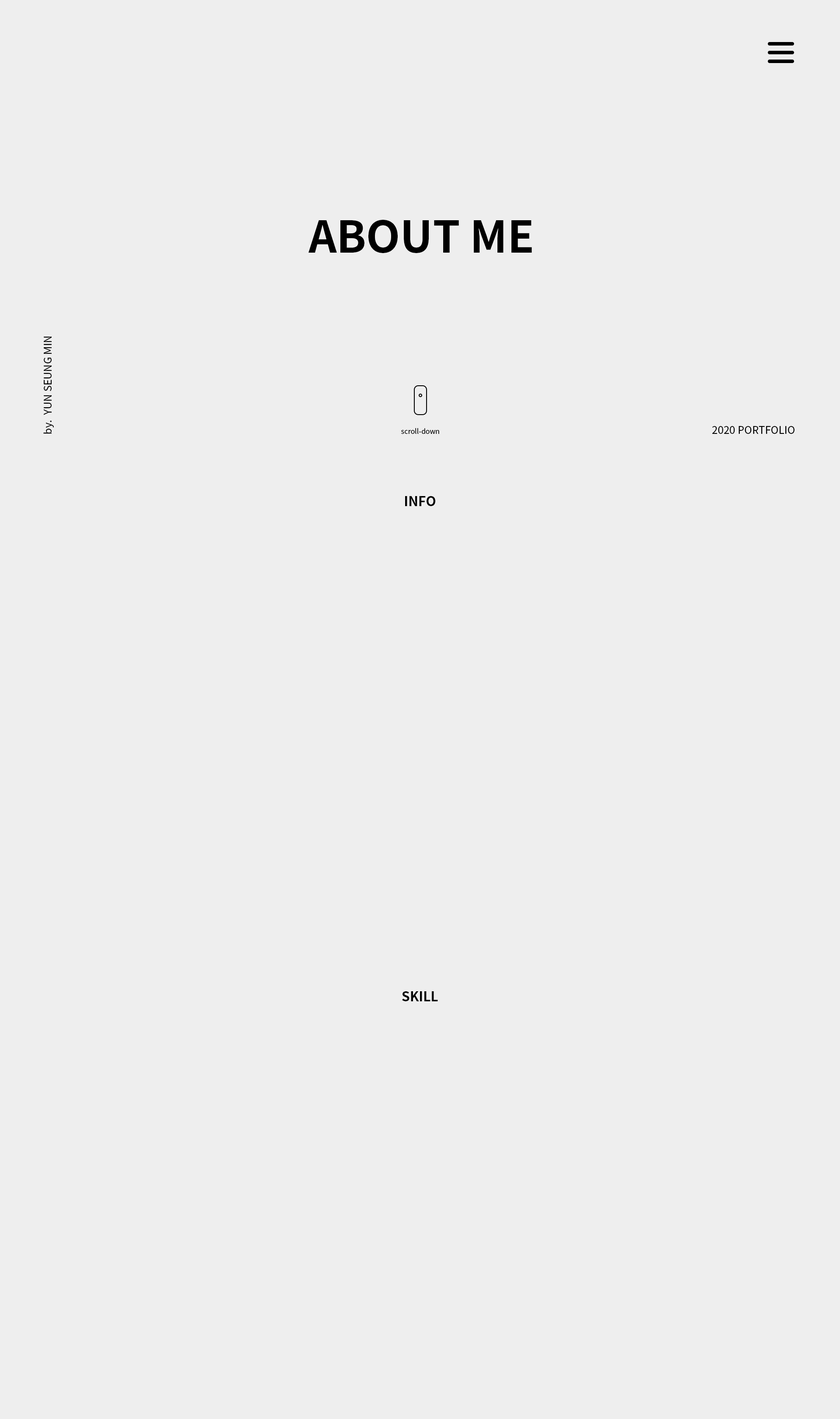
<style>
.page{position:relative;width:840px;height:1419px;background:#eeeeee}
.page>*{position:absolute;margin:0}
.t1{font:43.8px "NotoSansKR-Bold";color:#000000}
.t2{font:10.5px "NotoSansKR-Regular";color:#000000}
.t3{font:7px "NotoSansKR-Regular";letter-spacing:-0.001em;color:#000000}
.t4{font:13.1px "NotoSansKR-Bold";color:#000000}
</style>
<div class="page">
<p class="t1" style="left:309px;top:220px;width:223px;height:33px">ABOUT ME</p>
<p class="t2" style="left:43px;top:336px;width:11px;height:98px;rotate:-90deg">by.  YUN SEUNG MIN</p>
<p class="t2" style="left:713px;top:426px;width:82px;height:8px">2020 PORTFOLIO</p>
<p class="t3" style="left:401px;top:428px;width:39px;height:6px">scroll-down</p>
<p class="t4" style="left:405px;top:496px;width:31px;height:10px">INFO</p>
<p class="t4" style="left:402px;top:991px;width:36px;height:10px">SKILL</p>
</div>
